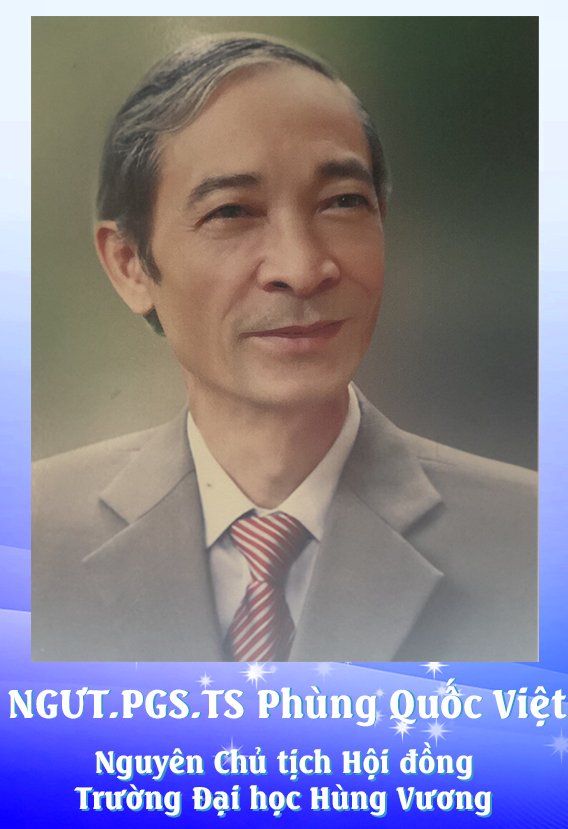
<style>
.page{position:relative;width:568px;height:829px}
.page>*{position:absolute;margin:0}
.t1{font:38.6px "UTMSeagullBold";color:#ffffff}
.t2{font:30px "UTMSeagullBold";color:#ffffff}
.t3{font:30px "UTMSeagullBold"}
</style>
<div class="page">
<p class="t1" style="left:8px;top:678px;width:559px;height:49px">NGƯT.PGS.TS Phùng Quốc Việt</p>
<p class="t1" style="left:10px;top:678px;width:558px;height:49px">NGƯT.PGS.TS Phùng Quốc Việt</p>
<p class="t2" style="left:74px;top:742px;width:417px;height:74px;text-align:center">Nguyên Chủ tịch Hội đồng<br>Trường Đại học Hùng Vương</p>
<p class="t3" style="left:76px;top:744px;width:417px;height:74px;text-align:center">Nguyên Chủ tịch Hội đồng<br>Trường Đại học Hùng Vương</p>
</div>
